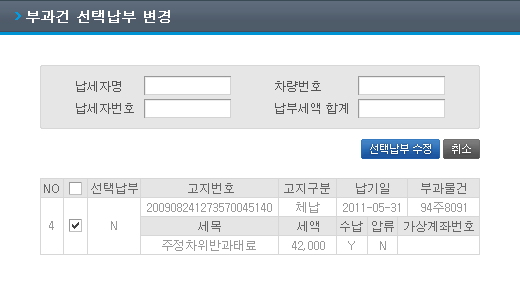
<style>
.page{position:relative;width:520px;height:305px;background:#ffffff}
.page>*{position:absolute;margin:0}
.t1{font:14px "Dotum";color:#ffffff;font-weight:bold}
.t2{font:12px/22px "Dotum";color:#555555;text-transform:uppercase}
.t3{font:11px "Dotum";letter-spacing:-0.1em;color:#ffffff}
.t4{font:12px "Dotum";color:#666666;text-transform:uppercase}
.t5{font:12px "Dotum";color:#999999;text-transform:uppercase}
</style>
<div class="page">
<p class="t1" style="left:26px;top:10px;width:144px;height:13px">부과건 선택납부 변경</p>
<p class="t2" style="left:76px;top:81px;width:58px;height:33px">납세자명<br>납세자번호</p>
<p class="t2" style="left:275px;top:81px;width:73px;height:33px">차량번호<br>납부세액 합계</p>
<p class="t3" style="left:370px;top:144px;width:61px;height:10px">선택납부 수정</p>
<p class="t3" style="left:452px;top:144px;width:19px;height:10px">취소</p>
<p class="t4" style="left:44px;top:184px;width:15px;height:9px">NO</p>
<p class="t4" style="left:91px;top:183px;width:375px;height:11px">선택납부            고지번호            고지구분      납기일       부과물건</p>
<p class="t5" style="left:147px;top:202px;width:319px;height:11px">200908241273570045140      체납     2011-05-31     94주8091</p>
<p class="t5" style="left:49px;top:221px;width:5px;height:9px">4</p>
<p class="t5" style="left:111px;top:221px;width:6px;height:9px">N</p>
<p class="t4" style="left:198px;top:221px;width:276px;height:11px">세목                   세액    수납  압류  가상계좌번호</p>
<p class="t5" style="left:162px;top:240px;width:224px;height:11px">주정차위반과태료         42,000     Y      N</p>
</div>
